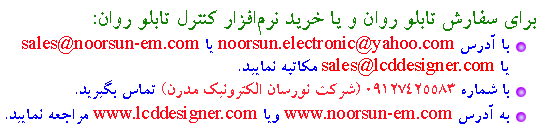
<style>
.page{position:relative;width:540px;height:135px;background:#ffffff}
.page>*{position:absolute;margin:0}
.t1{font:23px "BLotusBold";color:#118103}
.t2{font:18.5px "TimesNewRomanPSMT";color:#ff0012}
.t3{font:18.5px "BLotusBold";color:#0000f8}
.t4{font:18.5px "TimesNewRomanPSMT";color:#ff0000}
.t5{font:18.5px "BLotusBold";color:#ff2030}
.t6{font:18.5px "TimesNewRomanPSMT";color:#ff0819}
</style>
<div class="page">
<p class="t1" style="left:94px;top:10px;width:442px;height:25px">برای سفارش تابلو روان و یا خرید نرم‌افزار کنترل تابلو روان:</p>
<p class="t2" style="left:22px;top:34px;width:487px;height:42px"><span class="t3">با آدرس </span>noorsun.electronic@yahoo.com<span class="t3"> یا </span>sales@noorsun-em.com<span class="t3"><br>یا </span><span class="t4">sales@lcddesigner.com</span><span class="t3"> مکاتبه نمایید.</span></p>
<p class="t5" style="left:76px;top:80px;width:433px;height:19px"><span class="t3">با شماره </span>09127425583 (شرکت نورسان الکترونیک مدرن)<span class="t3"> تماس بگیرید.</span></p>
<p class="t6" style="left:6px;top:104px;width:503px;height:20px"><span class="t3">به آدرس </span>www.noorsun-em.com<span class="t3"> ویا </span>www.lcddesigner.com<span class="t3"> مراجعه نمایید.</span></p>
</div>
